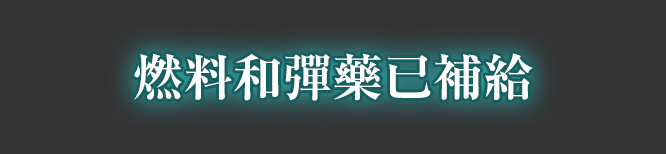
<style>
.page{position:relative;width:666px;height:154px;background:#333333}
.page>*{position:absolute;margin:0}
.t1{font:50px "RyuminPr6N-ExBold";color:#ffffff}
</style>
<div class="page">
<p class="t1" style="left:134px;top:53px;width:399px;height:48px">燃料和彈藥已補給</p>
</div>
